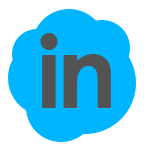
<style>
.page{position:relative;width:144px;height:144px;background:#00b5ff}
.page>*{position:absolute;margin:0}
.t1{font:100px "CenturyGothic-Bold";letter-spacing:-0.03em;color:#535353}
</style>
<div class="page">
<p class="t1" style="left:40px;top:33px;width:71px;height:75px">in</p>
</div>
